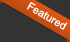
<style>
.page{position:relative;width:70px;height:42px;background:#333333}
.page>*{position:absolute;margin:0}
.t1{font:11px "ArialMT";color:#ffffff}
</style>
<div class="page">
<p class="t1" style="left:26px;top:2px;width:42px;height:28px;rotate:30deg">Featured</p>
</div>
